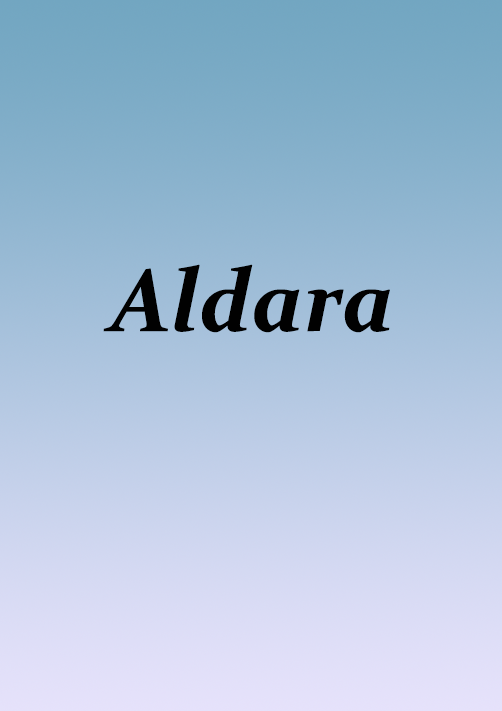
<style>
.page{position:relative;width:502px;height:711px}
.page>*{position:absolute;margin:0}
.t1{font:90px "Constantia-BoldItalic";color:#010101}
</style>
<div class="page">
<p class="t1" style="left:103px;top:264px;width:287px;height:69px">Aldara</p>
</div>
